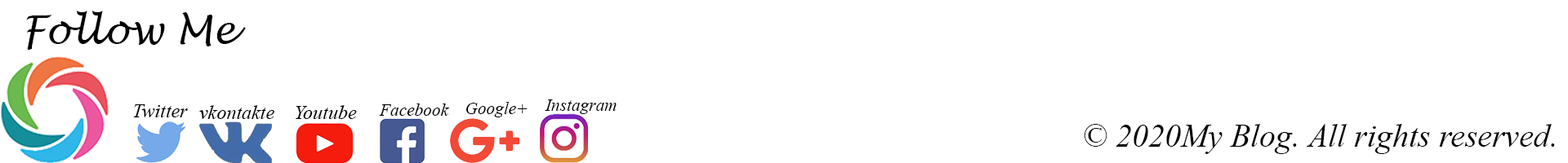
<style>
.page{position:relative;width:1568px;height:163px;background:#ffffff}
.page>*{position:absolute;margin:0}
.t1{font:39.2px "LucidaHandwriting-Italic";color:#000000}
.t2{font:17.4px "TimesNewRomanPS-ItalicMT";color:#000000}
.t3{font:19.6px "TimesNewRomanPS-ItalicMT";color:#000000}
.t4{font:32.7px "TimesNewRomanPS-ItalicMT";color:#000000}
</style>
<div class="page">
<p class="t1" style="left:26px;top:11px;width:220px;height:39px">Follow Me</p>
<p class="t2" style="left:545px;top:100px;width:72px;height:14px">Instagram</p>
<p class="t3" style="left:133px;top:105px;width:55px;height:13px">Twitter</p>
<p class="t3" style="left:199px;top:105px;width:75px;height:14px">vkontakte</p>
<p class="t3" style="left:296px;top:105px;width:61px;height:14px">Youtube</p>
<p class="t2" style="left:379px;top:104px;width:70px;height:12px">Facebook</p>
<p class="t2" style="left:466px;top:102px;width:62px;height:16px">Google+</p>
<p class="t4" style="left:1084px;top:124px;width:471px;height:30px">© 2020My Blog. All rights reserved.</p>
</div>
